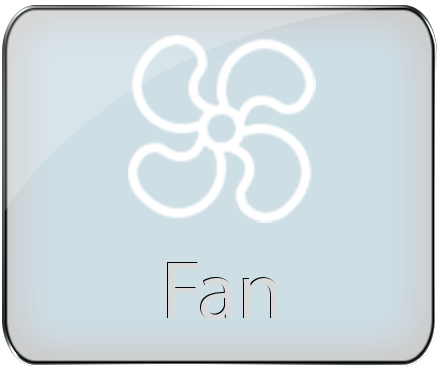
<style>
.page{position:relative;width:440px;height:369px;background:#cddee5}
.page>*{position:absolute;margin:0}
.t1{font:83.2px "MyriadPro-Regular";color:#d9d9d9}
</style>
<div class="page">
<p class="t1" style="left:167px;top:262px;width:111px;height:57px">Fan</p>
</div>
